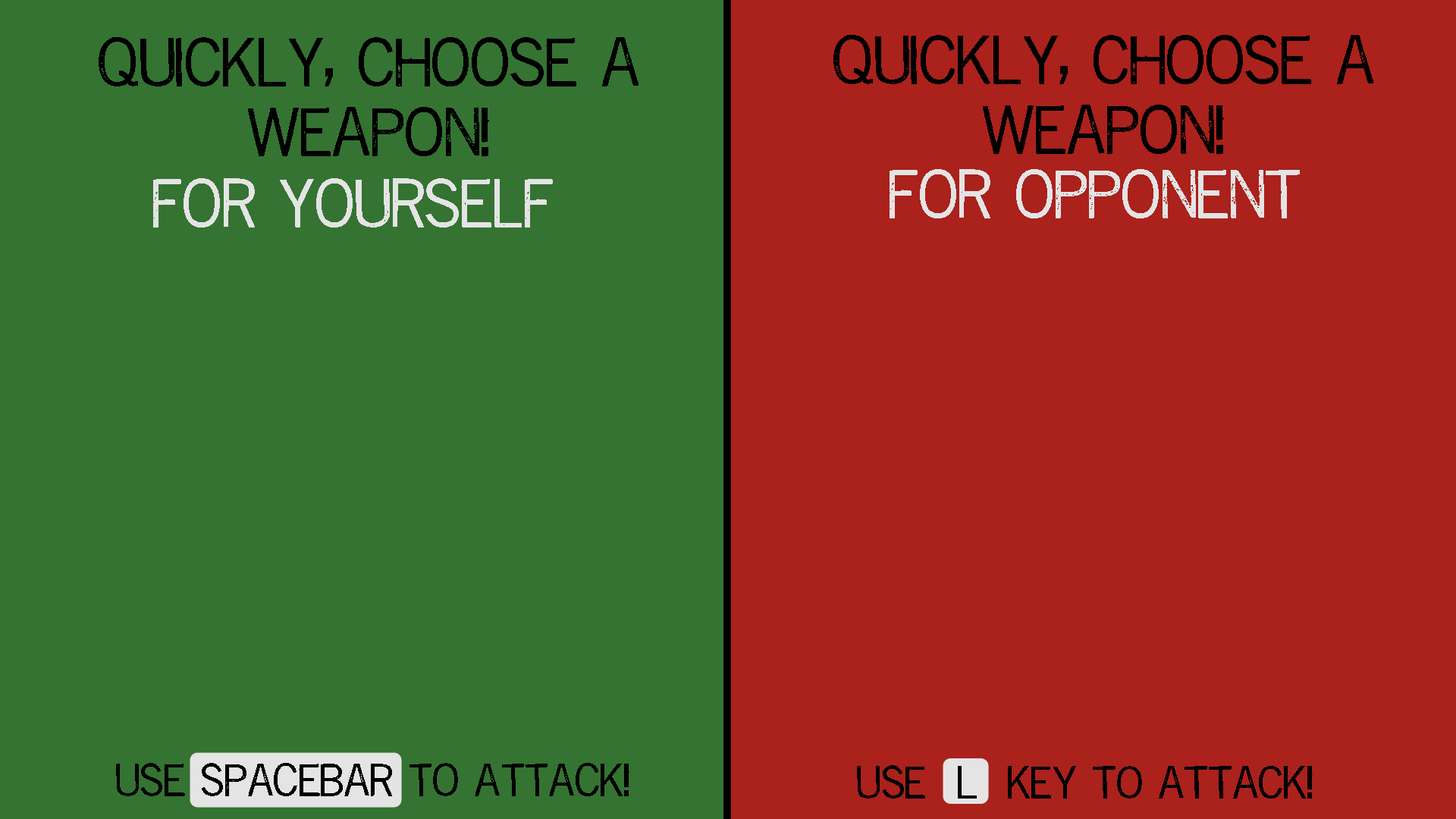
<style>
.page{position:relative;width:1456px;height:819px;background:#ab211c}
.page>*{position:absolute;margin:0}
.t1{font:52.2px/69.6px "RepriseStampStd";color:#000000}
.t2{font:52.2px "RepriseStampStd";color:#e4e4e4}
.t3{font:35px "RepriseStampStd";color:#000000}
.t4{font:34.8px "RepriseStampStd";color:#000000}
</style>
<div class="page">
<p class="t1" style="left:99px;top:37px;width:540px;height:119px;text-align:center">quickly, choose a weapon!</p>
<p class="t1" style="left:833px;top:35px;width:540px;height:119px;text-align:center">quickly, choose a weapon!</p>
<p class="t2" style="left:890px;top:169px;width:410px;height:49px">for opponent</p>
<p class="t2" style="left:153px;top:178px;width:400px;height:49px">for yourself</p>
<p class="t3" style="left:116px;top:763px;width:513px;height:33px">use spacebar to attack!</p>
<p class="t4" style="left:857px;top:765px;width:456px;height:34px">use  l  key to attack!</p>
</div>
